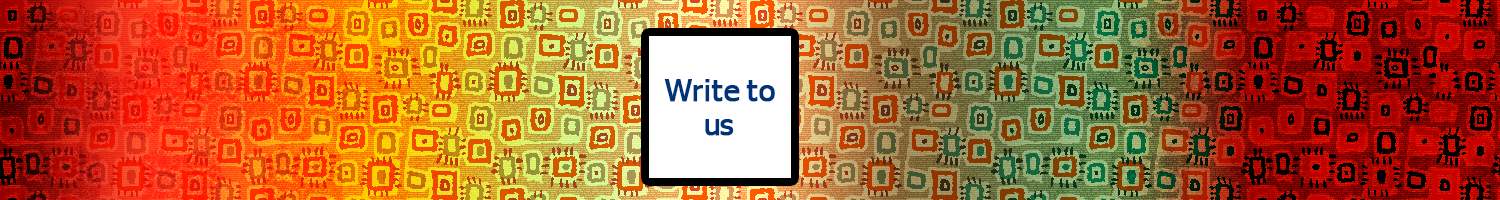
<style>
.page{position:relative;width:1500px;height:200px}
.page>*{position:absolute;margin:0}
.t1{font:30px "Tahoma";color:#003479;font-weight:bold}
</style>
<div class="page">
<p class="t1" style="left:664px;top:79px;width:28px;height:23px">W</p>
<p class="t1" style="left:693px;top:85px;width:10px;height:17px">r</p>
<p class="t1" style="left:705px;top:79px;width:5px;height:23px">i</p>
<p class="t1" style="left:711px;top:80px;width:12px;height:22px">t</p>
<p class="t1" style="left:724px;top:85px;width:16px;height:17px">e</p>
<p class="t1" style="left:746px;top:80px;width:12px;height:22px">t</p>
<p class="t1" style="left:759px;top:85px;width:16px;height:17px">o</p>
<p class="t1" style="left:705px;top:119px;width:15px;height:17px">u</p>
<p class="t1" style="left:720px;top:119px;width:14px;height:17px">s</p>
</div>
